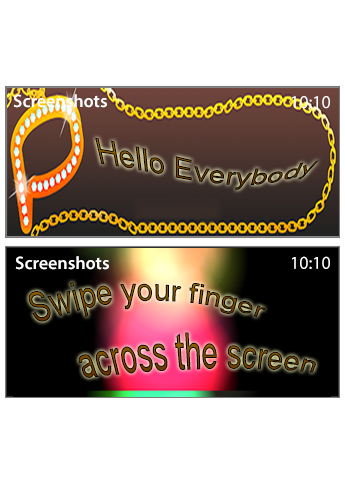
<style>
.page{position:relative;width:345px;height:480px;background:#ffffff}
.page>*{position:absolute;margin:0}
.t1{font:18px "MyriadPro-Semibold";color:#ffffff}
.t2{font:18px "MyriadPro-Regular";color:#ffffff}
.t3{font:30px "ArialMT"}
</style>
<div class="page">
<p class="t1" style="left:13px;top:94px;width:94px;height:14px">Screenshots</p>
<p class="t2" style="left:292px;top:96px;width:38px;height:13px">10:10</p>
<p class="t3" style="left:95px;top:138px;width:224px;height:52px">Hello Everybody</p>
<p class="t1" style="left:15px;top:256px;width:94px;height:14px">Screenshots</p>
<p class="t2" style="left:292px;top:256px;width:38px;height:13px">10:10</p>
<p class="t3" style="left:28px;top:282px;width:238px;height:40px">Swipe your finger</p>
<p class="t3" style="left:78px;top:332px;width:238px;height:46px">across the screen</p>
</div>
